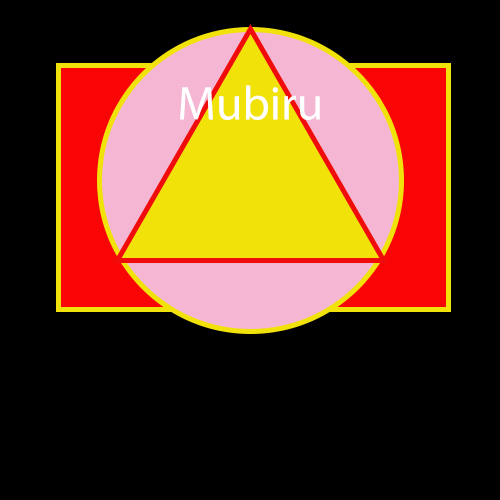
<style>
.page{position:relative;width:500px;height:500px;background:#000000}
.page>*{position:absolute;margin:0}
.t1{font:48px "MyriadPro-Regular";color:#ffffff}
</style>
<div class="page">
<p class="t1" style="left:180px;top:85px;width:140px;height:35px">Mubiru</p>
</div>
